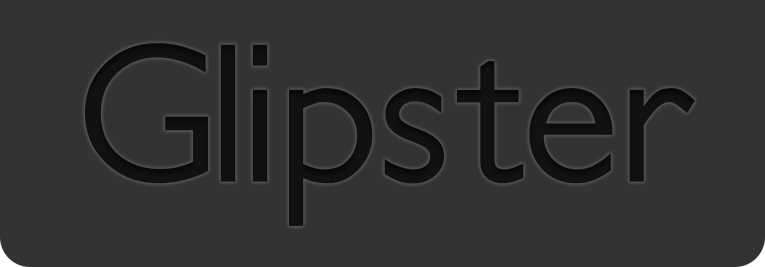
<style>
.page{position:relative;width:765px;height:267px;background:#333333}
.page>*{position:absolute;margin:0}
.t1{font:193.3px "PetitaMedium";color:#111111}
</style>
<div class="page">
<p class="t1" style="left:85px;top:43px;width:610px;height:183px">Glipster</p>
</div>
